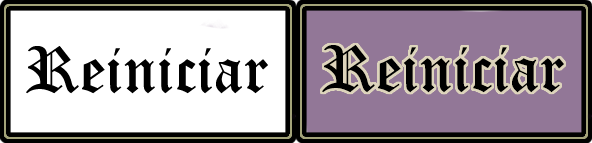
<style>
.page{position:relative;width:592px;height:143px;background:#ffffff}
.page>*{position:absolute;margin:0}
.t1{font:64.8px "OldEnglishTextMT";color:#000000}
</style>
<div class="page">
<p class="t1" style="left:26px;top:46px;width:242px;height:48px">Reiniciar</p>
<p class="t1" style="left:322px;top:45px;width:242px;height:48px">Reiniciar</p>
</div>
